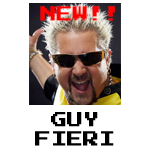
<style>
.page{position:relative;width:150px;height:150px;background:#ffffff}
.page>*{position:absolute;margin:0}
.t1{font:16px "PressStart2P-Regular";color:#ff0000}
.t2{font:16px "PressStart2P-Regular";color:#000000}
</style>
<div class="page">
<p class="t1" style="left:40px;top:6px;width:75px;height:15px">NEW!!</p>
<p class="t2" style="left:35px;top:112px;width:79px;height:34px;text-align:center">GUY<br>FIERI</p>
</div>
